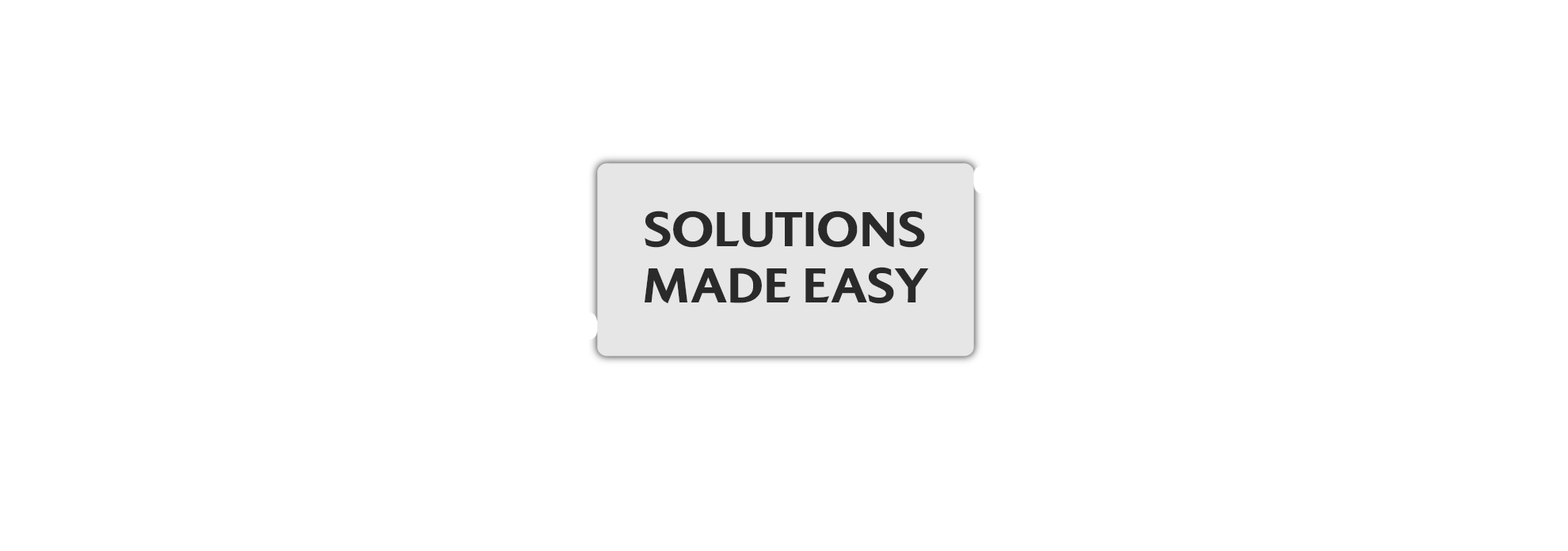
<style>
.page{position:relative;width:1568px;height:551px;background:#ffffff}
.page>*{position:absolute;margin:0}
.t1{font:50.7px/56.2px "ColosseumW00-Bold";letter-spacing:0.001em;color:#2b2a2a}
</style>
<div class="page">
<p class="t1" style="left:645px;top:211px;width:284px;height:93px;text-align:center">SOLUTIONS MADE EASY</p>
</div>
